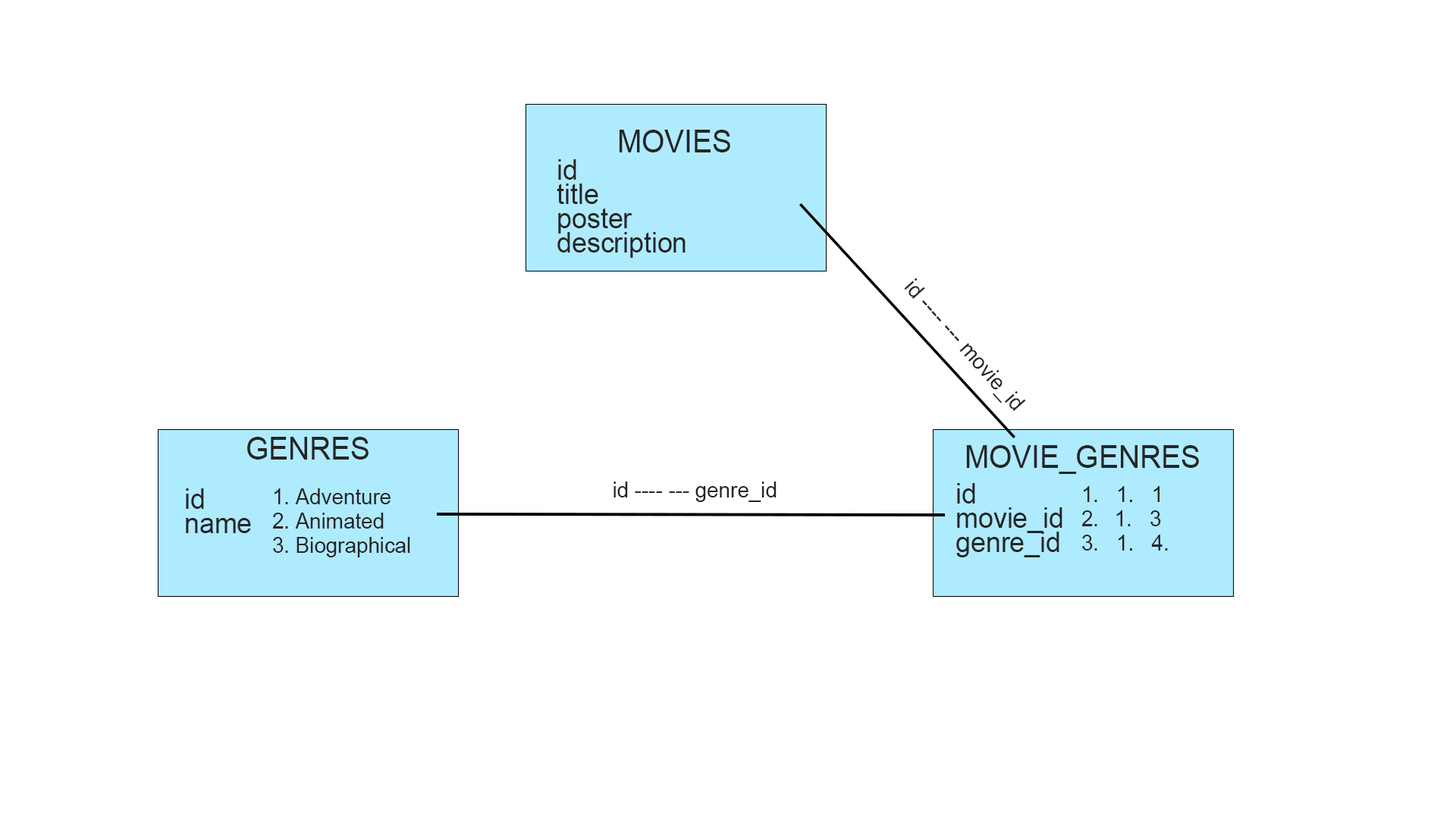
<style>
.page{position:relative;width:1456px;height:819px;background:#ffffff}
.page>*{position:absolute;margin:0}
.t1{font:30.8px "ArialMT";color:#252525;text-transform:uppercase;scale:0.96 1}
.t2{font:28.1px/24.3px "ArialMT";color:#252525;scale:0.96 1}
.t3{font:22px "ArialMT";color:#252525;scale:0.96 1}
.t4{font:22px/24.3px "ArialMT";color:#252525;scale:0.96 1}
</style>
<div class="page">
<p class="t1" style="left:619px;top:130px;width:111px;height:22px">Movies</p>
<p class="t2" style="left:557px;top:159px;width:129px;height:99px">id<br>title<br>poster<br>description</p>
<p class="t3" style="left:904px;top:278px;width:122px;height:133px;rotate:48deg">id ---- --- movie_id</p>
<p class="t1" style="left:247px;top:437px;width:122px;height:23px">Genres</p>
<p class="t1" style="left:966px;top:445px;width:233px;height:29px">Movie_genres</p>
<p class="t3" style="left:613px;top:482px;width:164px;height:20px">id ---- --- genre_id</p>
<p class="t2" style="left:956px;top:483px;width:106px;height:74px">id<br>movie_id<br>genre_id</p>
<p class="t2" style="left:186px;top:488px;width:65px;height:45px">id<br>name</p>
<p class="t4" style="left:272px;top:488px;width:138px;height:69px">1. Adventure<br>2. Animated<br>3. Biographical</p>
<p class="t4" style="left:1081px;top:486px;width:87px;height:65px">1.   1.   1<br>2.  1.   3<br>3.   1.   4.</p>
</div>
